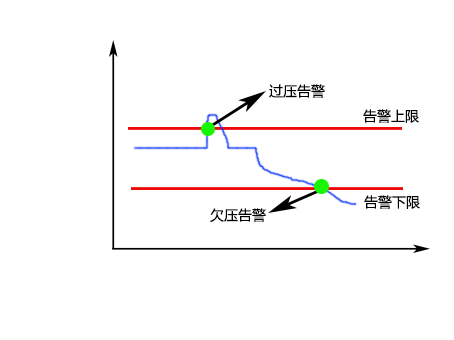
<style>
.page{position:relative;width:454px;height:340px;background:#ffffff}
.page>*{position:absolute;margin:0}
.t1{font:14px "MicrosoftYaHei";color:#000000}
.t2{font:14px "MicrosoftYaHei";color:#030303}
</style>
<div class="page">
<p class="t1" style="left:269px;top:84px;width:56px;height:14px">过压告警</p>
<p class="t2" style="left:363px;top:109px;width:56px;height:14px">告警上限</p>
<p class="t2" style="left:364px;top:195px;width:56px;height:14px">告警下限</p>
<p class="t1" style="left:210px;top:208px;width:56px;height:14px">欠压告警</p>
</div>
